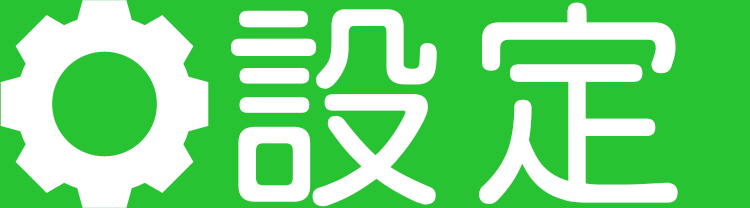
<style>
.page{position:relative;width:750px;height:208px;background:#28c332}
.page>*{position:absolute;margin:0}
.t1{font:220px "DFYuan-Bd-HKP-BF";letter-spacing:0.1em;color:#ffffff}
</style>
<div class="page">
<p class="t1" style="left:231px;top:2px;width:447px;height:205px">設定</p>
</div>
